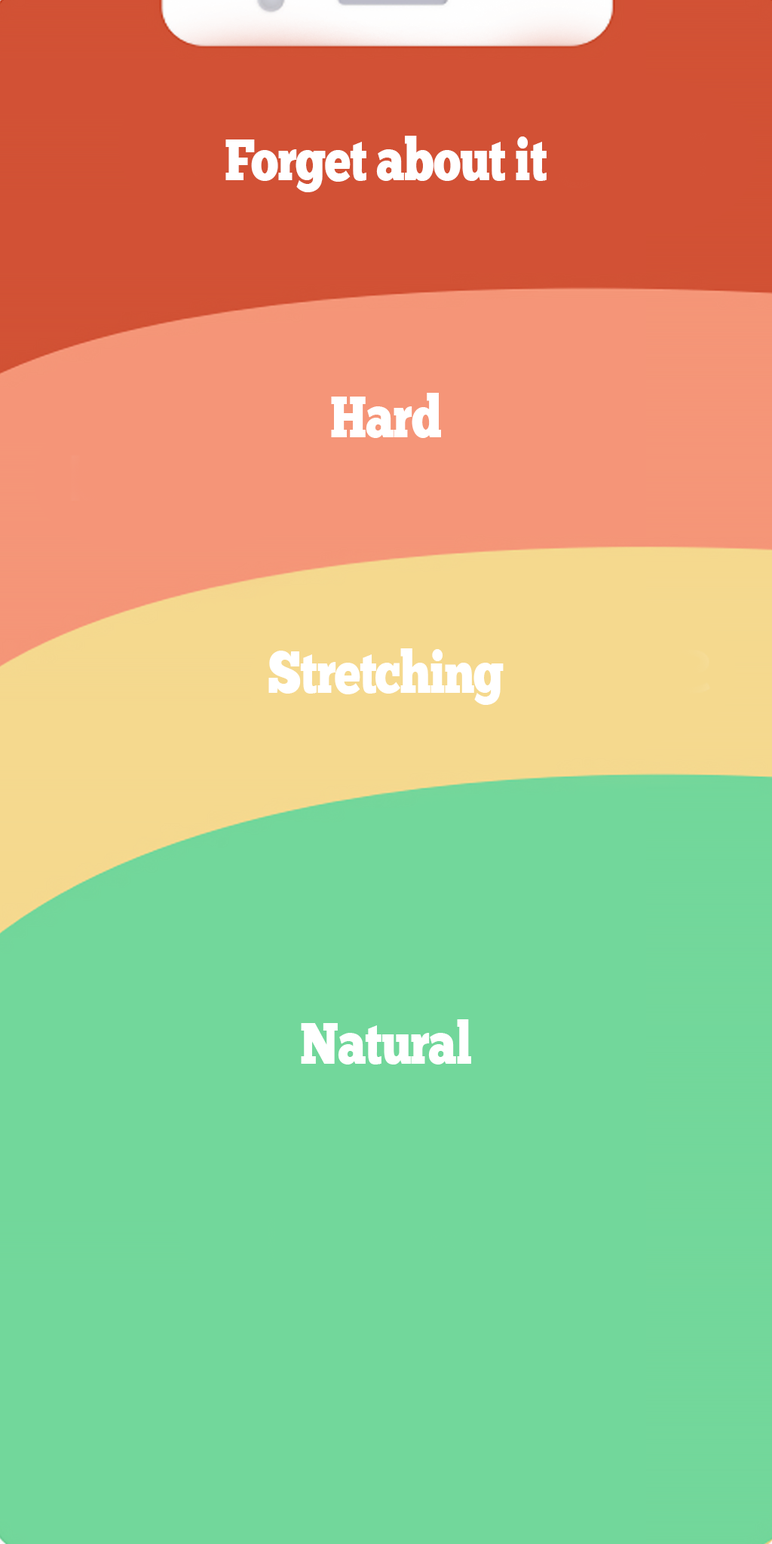
<style>
.page{position:relative;width:772px;height:1544px;background:#72d79b}
.page>*{position:absolute;margin:0}
.t1{font:58.8px "ChunkFiveEx";letter-spacing:-0.025em;color:#ffffff;scale:0.81 1}
</style>
<div class="page">
<p class="t1" style="left:225px;top:136px;width:322px;height:56px">Forget about it</p>
<p class="t1" style="left:331px;top:393px;width:110px;height:45px">Hard</p>
<p class="t1" style="left:268px;top:648px;width:236px;height:57px">Stretching</p>
<p class="t1" style="left:301px;top:1019px;width:170px;height:46px">Natural</p>
</div>
